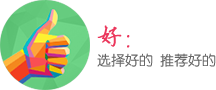
<style>
.page{position:relative;width:216px;height:90px;background:#ffffff}
.page>*{position:absolute;margin:0}
.t1{font:14px/30px "FZY3JW--GB1-0";color:#666666}
.t2{font:24px/30px "FZYBKSJW--GB1-0";color:#eb375c;font-weight:bold}
</style>
<div class="page">
<p class="t1" style="left:97px;top:25px;width:119px;height:42px"><span class="t2">好：<br></span>选择好的  推荐好的</p>
</div>
